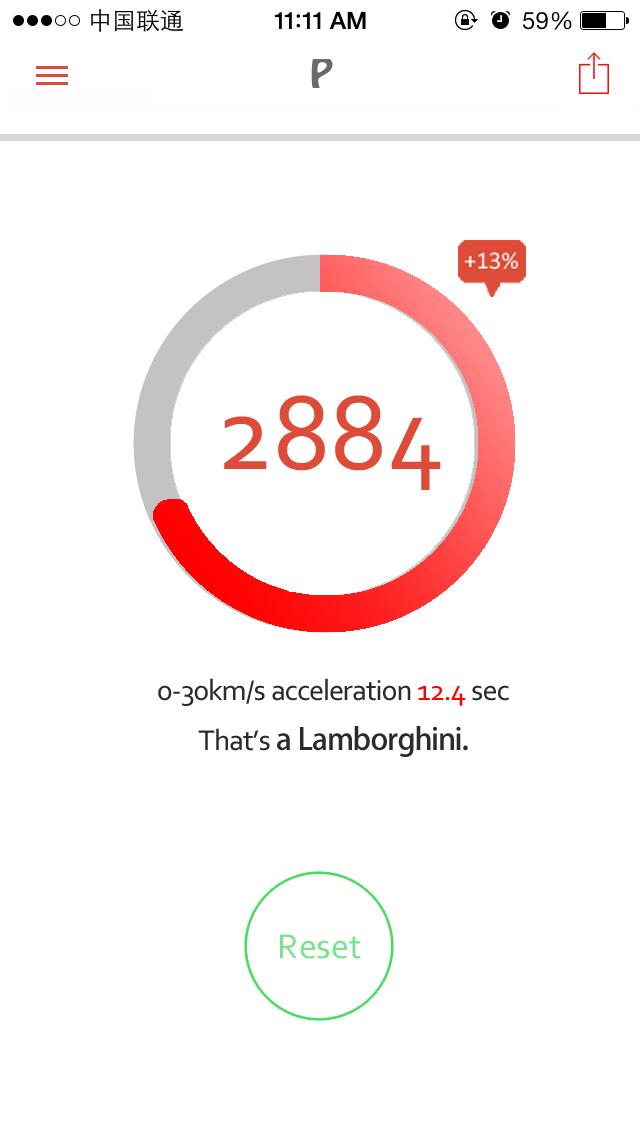
<style>
.page{position:relative;width:640px;height:1136px;background:#ffffff}
.page>*{position:absolute;margin:0}
.t1{font:36px "HoboStd";color:#6b6b6b}
.t2{font:110.5px "Corbel";color:#dd4b39}
.t3{font:30px/48px "Corbel";color:#2b2b2b}
.t4{font:30px/48px "Corbel";color:#ff0000}
.t5{font:30px/48px "AdobeHeitiStd-Regular";color:#2b2b2b}
</style>
<div class="page">
<p class="t1" style="left:311px;top:58px;width:22px;height:30px">P</p>
<p class="t2" style="left:224px;top:395px;width:217px;height:95px">2884</p>
<p class="t3" style="left:158px;top:678px;width:351px;height:79px;text-align:center">0-30km/s acceleration <span class="t4">12.4</span> sec<br>That’s <span class="t5">a Lamborghini.</span></p>
</div>
